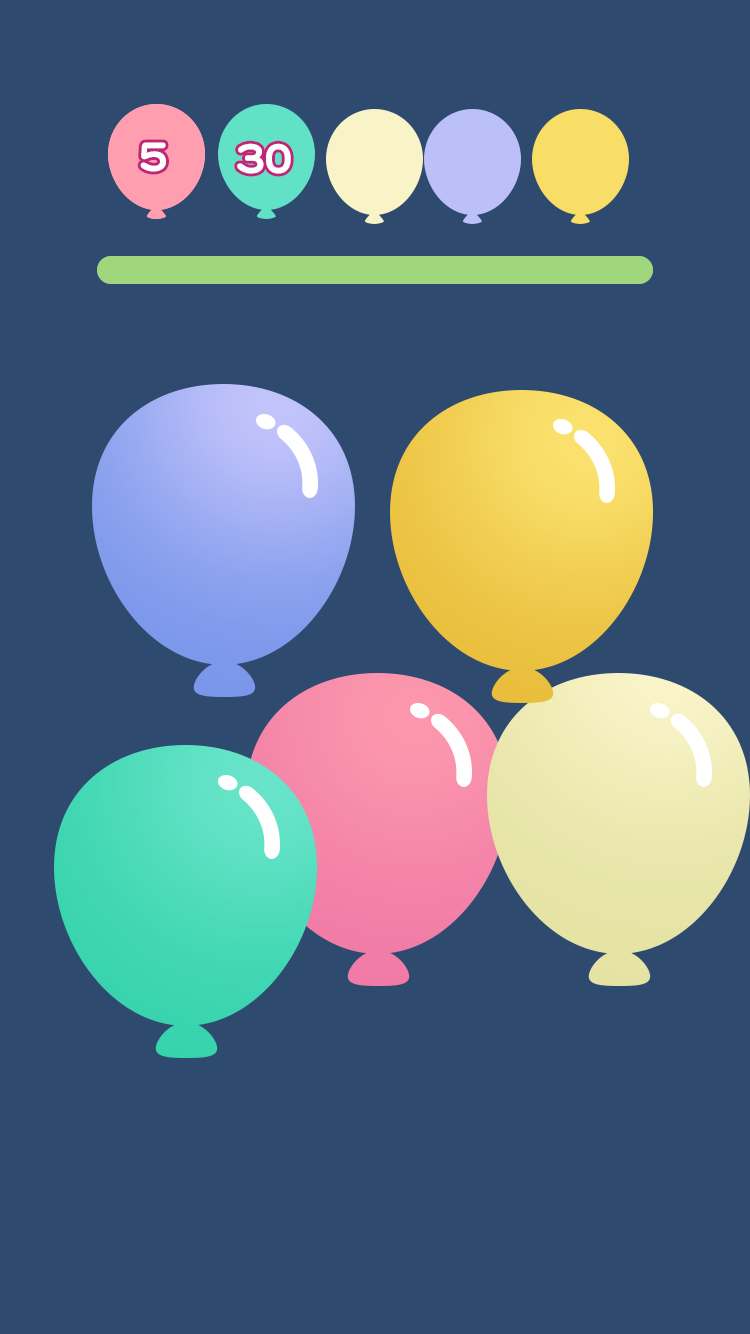
<style>
.page{position:relative;width:750px;height:1334px;background:#2f4a6f}
.page>*{position:absolute;margin:0}
.t1{font:42.7px "DFPYuanW9";letter-spacing:0.2em;color:#ffffff}
.t2{font:42.7px "DFPYuanW9";letter-spacing:-0.05em;color:#ffffff}
</style>
<div class="page">
<p class="t1" style="left:140px;top:142px;width:26px;height:30px">5</p>
<p class="t2" style="left:237px;top:143px;width:54px;height:31px">30</p>
</div>
